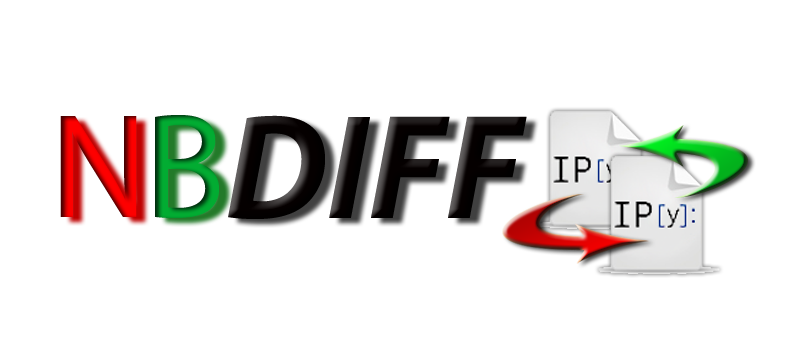
<style>
.page{position:relative;width:797px;height:343px;background:#ffffff}
.page>*{position:absolute;margin:0}
.t1{font:150px "MyriadPro-Regular"}
.t2{font:150px "MyriadPro-Regular";color:#02ac32}
.t3{font:150px "MyriadPro-BoldIt";color:#050000}
</style>
<div class="page">
<p class="t1" style="left:60px;top:116px;width:77px;height:101px">N</p>
<p class="t2" style="left:155px;top:115px;width:64px;height:103px">B</p>
<p class="t3" style="left:228px;top:115px;width:299px;height:104px">DIFF</p>
</div>
